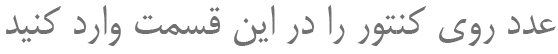
<style>
.page{position:relative;width:558px;height:54px;background:#ffffff}
.page>*{position:absolute;margin:0}
.t1{font:48px "BMitra";color:#717171}
</style>
<div class="page">
<p class="t1" style="left:6px;top:5px;width:550px;height:41px">عدد روی کنتور را در این قسمت وارد کنید</p>
</div>
